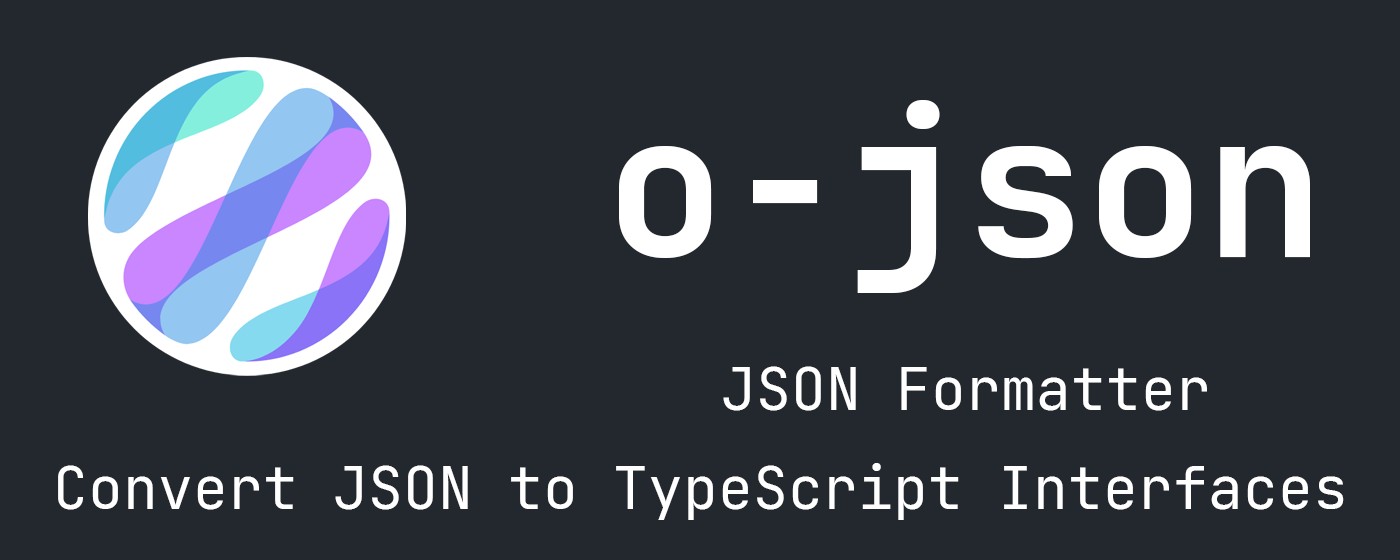
<style>
.page{position:relative;width:1400px;height:560px;background:#23272e}
.page>*{position:absolute;margin:0}
.t1{font:200px "JetBrainsMono-Bold";color:#ffffff}
.t2{font:58.3px "JetBrainsMono-Regular";color:#ffffff}
</style>
<div class="page">
<p class="t1" style="left:619px;top:100px;width:691px;height:193px">o-json</p>
<p class="t2" style="left:723px;top:366px;width:484px;height:45px">JSON Formatter</p>
<p class="t2" style="left:58px;top:463px;width:1286px;height:57px">Convert JSON to TypeScript Interfaces</p>
</div>
